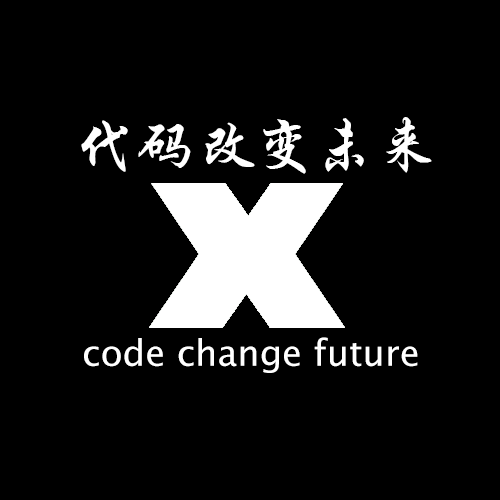
<style>
.page{position:relative;width:500px;height:500px;background:#000000}
.page>*{position:absolute;margin:0}
.t1{font:60px "STXingkai";color:#ffffff}
.t2{font:36px "LucidaSansUnicode";color:#ffffff}
</style>
<div class="page">
<p class="t1" style="left:81px;top:117px;width:351px;height:57px">代码改变未来</p>
<p class="t2" style="left:84px;top:337px;width:334px;height:36px">code change future</p>
</div>
